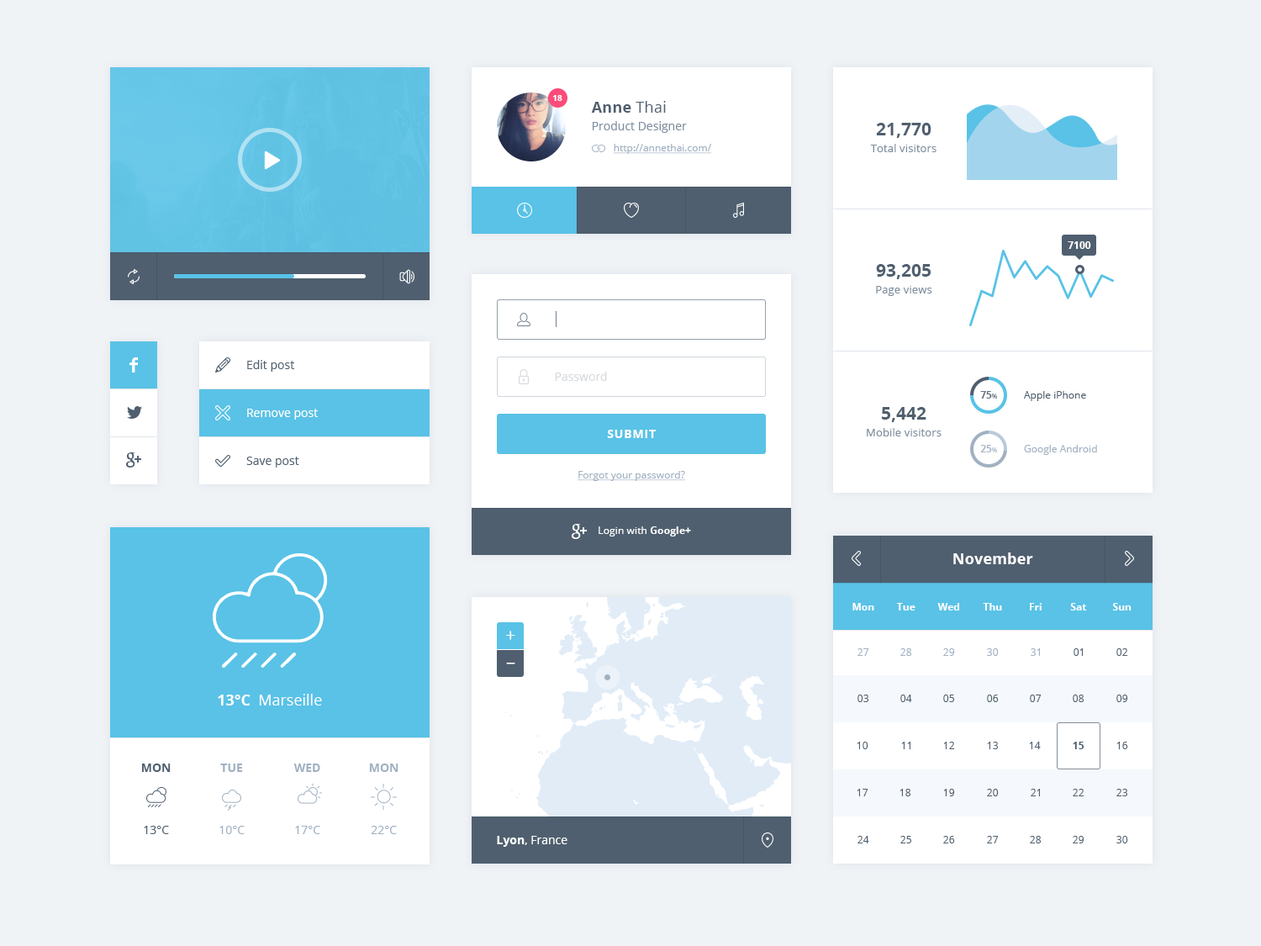
<style>
.page{position:relative;width:1261px;height:946px;background:#f0f3f6}
.page>*{position:absolute;margin:0}
.t1{font:8.4px "OpenSans-Bold";color:#ffffff}
.t2{font:11.8px/17.7px "OpenSans";color:#7e8e9f}
.t3{font:15.1px "OpenSans-Bold";letter-spacing:0.015em;color:#4f5f6f}
.t4{font:15.1px "OpenSans";letter-spacing:0.015em;color:#4f5f6f}
.t5{font:10.9px/16.8px "OpenSans";letter-spacing:0.01em;color:#7e8e9f}
.t6{font:17.7px/14.2px "OpenSans-Bold";color:#4f5f6f}
.t7{font:10.1px "OpenSans";color:#a1b1c2;text-decoration:underline}
.t8{font:10.1px "MyriadPro-Regular";color:#ffffff}
.t9{font:11.8px "OpenSans";color:#4f5f6f}
.t10{font:11.8px "OpenSans";color:#d5d9dd}
.t11{font:10.1px "OpenSans-Bold";color:#4f5f6f}
.t12{font:6.7px "OpenSans";color:#4f5f6f}
.t13{font:10.1px "OpenSans";color:#4f5f6f}
.t14{font:11.8px "OpenSans";color:#ffffff}
.t15{font:11.8px "OpenSans-Bold";letter-spacing:0.06em;color:#ffffff}
.t16{font:10.1px "OpenSans-Bold";color:#a1b1c2}
.t17{font:6.7px "OpenSans";color:#a1b1c2}
.t18{font:10.1px "OpenSans";color:#a1b1c2}
.t19{font:10.1px "OpenSans";letter-spacing:0.01em;color:#ffffff}
.t20{font:10.1px "OpenSans-Bold";letter-spacing:0.01em;color:#ffffff}
.t21{font:15.1px "OpenSans-Bold";letter-spacing:0.01em;color:#ffffff}
.t22{font:10.1px "OpenSans-Bold";color:#ffffff}
.t23{font:17.7px "OpenSans";color:#ffffff}
.t24{font:10.1px "MyriadPro-Regular";color:#a1b1c2}
.t25{font:10.1px "MyriadPro-Regular";color:#4f5f6f}
.t26{font:15.1px "OpenSans";color:#ffffff}
.t27{font:15.1px "MyriadPro-Regular";color:#ffffff}
.t28{font:11.8px/62.2px "OpenSans";color:#4f5f6f}
.t29{font:11.8px/6.7px "MyriadPro-Regular";color:#4f5f6f}
.t30{font:11.8px/62.2px "OpenSans";color:#a1b1c2}
.t31{font:11.8px/6.7px "MyriadPro-Regular";color:#a1b1c2}
.t32{font:11.8px "OpenSans-Bold";color:#ffffff}
</style>
<div class="page">
<p class="t1" style="left:552px;top:95px;width:10px;height:6px">18</p>
<p class="t2" style="left:591px;top:101px;width:96px;height:32px"><span class="t3">Anne</span><span class="t4"> Thai<br></span>Product Designer</p>
<p class="t5" style="left:870px;top:123px;width:66px;height:29px;text-align:center"><span class="t6">21,770<br></span>Total visitors</p>
<p class="t7" style="left:613px;top:144px;width:99px;height:10px">http://annethai.com/</p>
<p class="t8" style="left:1068px;top:241px;width:23px;height:8px">7100</p>
<p class="t5" style="left:876px;top:264px;width:56px;height:32px;text-align:center"><span class="t6">93,205<br></span>Page views</p>
<p class="t9" style="left:247px;top:360px;width:47px;height:12px">Edit post</p>
<p class="t10" style="left:555px;top:372px;width:52px;height:9px">Password</p>
<p class="t11" style="left:980px;top:391px;width:17px;height:8px;opacity:0.9">75<span class="t12">%</span></p>
<p class="t13" style="left:1024px;top:391px;width:62px;height:10px">Apple iPhone</p>
<p class="t14" style="left:247px;top:409px;width:71px;height:10px">Remove post</p>
<p class="t5" style="left:867px;top:407px;width:74px;height:29px;text-align:center"><span class="t6">5,442<br></span>Mobile visitors</p>
<p class="t15" style="left:607px;top:430px;width:49px;height:8px">SUBMIT</p>
<p class="t16" style="left:980px;top:445px;width:17px;height:8px;opacity:0.9">25<span class="t17">%</span></p>
<p class="t18" style="left:1024px;top:445px;width:73px;height:10px">Google Android</p>
<p class="t9" style="left:246px;top:456px;width:53px;height:11px">Save post</p>
<p class="t7" style="left:577px;top:471px;width:108px;height:10px">Forgot your password?</p>
<p class="t19" style="left:599px;top:526px;width:92px;height:10px">Login with<span class="t20"> Google+</span></p>
<p class="t21" style="left:953px;top:552px;width:80px;height:12px">November</p>
<p class="t22" style="left:852px;top:603px;width:22px;height:7px">Mon</p>
<p class="t22" style="left:896px;top:603px;width:19px;height:7px">Tue</p>
<p class="t22" style="left:937px;top:603px;width:22px;height:7px">Wed</p>
<p class="t22" style="left:983px;top:603px;width:19px;height:7px">Thu</p>
<p class="t22" style="left:1030px;top:603px;width:12px;height:7px">Fri</p>
<p class="t22" style="left:1070px;top:603px;width:17px;height:7px">Sat</p>
<p class="t22" style="left:1113px;top:603px;width:18px;height:7px">Sun</p>
<p class="t23" style="left:506px;top:630px;width:9px;height:10px">+</p>
<p class="t24" style="left:857px;top:648px;width:12px;height:8px">27</p>
<p class="t24" style="left:900px;top:648px;width:12px;height:8px">28</p>
<p class="t24" style="left:943px;top:648px;width:12px;height:8px">29</p>
<p class="t24" style="left:987px;top:648px;width:12px;height:8px">30</p>
<p class="t24" style="left:1031px;top:648px;width:9px;height:8px">31</p>
<p class="t25" style="left:1073px;top:648px;width:10px;height:8px">01</p>
<p class="t25" style="left:1116px;top:648px;width:12px;height:8px">02</p>
<p class="t23" style="left:506px;top:662px;width:9px;height:2px">_</p>
<p class="t26" style="left:218px;top:694px;width:104px;height:11px"><span class="t27">13°C  </span>Marseille</p>
<p class="t25" style="left:857px;top:694px;width:11px;height:8px">03</p>
<p class="t25" style="left:900px;top:694px;width:12px;height:8px">04</p>
<p class="t25" style="left:943px;top:694px;width:11px;height:8px">05</p>
<p class="t25" style="left:987px;top:694px;width:12px;height:8px">06</p>
<p class="t25" style="left:1030px;top:694px;width:12px;height:8px">07</p>
<p class="t25" style="left:1073px;top:694px;width:11px;height:8px">08</p>
<p class="t25" style="left:1116px;top:694px;width:12px;height:8px">09</p>
<p class="t25" style="left:857px;top:741px;width:11px;height:8px">10</p>
<p class="t25" style="left:901px;top:741px;width:9px;height:8px">11</p>
<p class="t25" style="left:943px;top:741px;width:12px;height:8px">12</p>
<p class="t25" style="left:987px;top:741px;width:11px;height:8px">13</p>
<p class="t25" style="left:1029px;top:741px;width:12px;height:8px">14</p>
<p class="t11" style="left:1073px;top:741px;width:11px;height:8px">15</p>
<p class="t25" style="left:1116px;top:741px;width:12px;height:8px">16</p>
<p class="t28" style="left:141px;top:763px;width:30px;height:71px;text-align:center"><span class="t29">MON<br></span>13°C</p>
<p class="t30" style="left:219px;top:763px;width:26px;height:71px;text-align:center"><span class="t31">TUE<br></span>10°C</p>
<p class="t30" style="left:293px;top:763px;width:27px;height:71px;text-align:center"><span class="t31">WED<br></span>17°C</p>
<p class="t30" style="left:369px;top:763px;width:29px;height:71px;text-align:center"><span class="t31">MON<br></span>22°C</p>
<p class="t25" style="left:857px;top:788px;width:11px;height:8px">17</p>
<p class="t25" style="left:899px;top:788px;width:12px;height:8px">18</p>
<p class="t25" style="left:943px;top:788px;width:12px;height:8px">19</p>
<p class="t25" style="left:987px;top:788px;width:12px;height:8px">20</p>
<p class="t25" style="left:1031px;top:788px;width:9px;height:8px">21</p>
<p class="t13" style="left:1073px;top:788px;width:11px;height:8px">22</p>
<p class="t25" style="left:1116px;top:788px;width:11px;height:8px">23</p>
<p class="t14" style="left:497px;top:836px;width:70px;height:10px"><span class="t32">Lyon</span>, France</p>
<p class="t25" style="left:857px;top:836px;width:12px;height:7px">24</p>
<p class="t25" style="left:900px;top:836px;width:11px;height:7px">25</p>
<p class="t25" style="left:943px;top:836px;width:12px;height:7px">26</p>
<p class="t25" style="left:987px;top:836px;width:12px;height:7px">27</p>
<p class="t25" style="left:1030px;top:836px;width:12px;height:7px">28</p>
<p class="t25" style="left:1073px;top:836px;width:11px;height:7px">29</p>
<p class="t25" style="left:1116px;top:836px;width:12px;height:7px">30</p>
</div>
